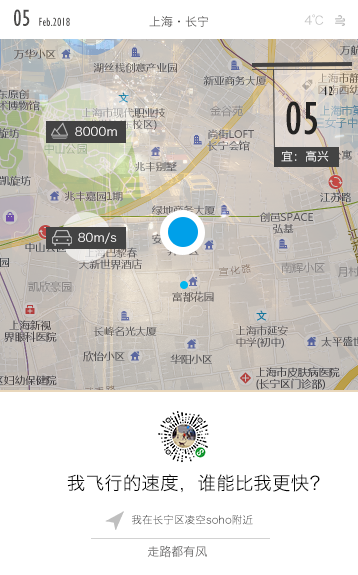
<style>
.page{position:relative;width:358px;height:575px;background:#ffffff}
.page>*{position:absolute;margin:0}
.t1{font:12px "GillSansMT-Condensed";color:#4d4c4b}
.t2{font:24px "GillSansMT-Condensed";color:#4d4c4b}
.t3{font:12px "HiraginoSansGB-W3";color:#4d4c4b}
.t4{font:12px "HiraginoSansGB-W3";color:#c3c3c3}
.t5{font:13.3px "GillSansMT-Condensed";color:#242423}
.t6{font:48px "GillSansMT-Condensed";color:#242423}
.t7{font:12px "HiraginoSansGB-W3";color:#fdfbfb}
.t8{font:12px "HiraginoSansGB-W3";color:#fefefe}
.t9{font:18.7px "HiraginoSansGB-W3";color:#040404}
.t10{font:10.7px "HiraginoSansGB-W3";color:#484848}
.t11{font:12px "HiraginoSansGB-W3";color:#5c5b5b}
</style>
<div class="page">
<p class="t1" style="left:14px;top:9px;width:56px;height:17px"><span class="t2">05 </span>Feb.2018</p>
<p class="t3" style="left:149px;top:16px;width:59px;height:11px">上海·长宁</p>
<p class="t4" style="left:304px;top:14px;width:20px;height:11px">4℃</p>
<p class="t5" style="left:325px;top:86px;width:8px;height:10px">12</p>
<p class="t6" style="left:286px;top:101px;width:31px;height:34px">05</p>
<p class="t7" style="left:75px;top:126px;width:42px;height:10px">8000m</p>
<p class="t8" style="left:281px;top:150px;width:48px;height:12px">宜：高兴</p>
<p class="t7" style="left:78px;top:232px;width:39px;height:12px">80m/s</p>
<p class="t9" style="left:67px;top:474px;width:253px;height:19px">我飞行的速度，谁能比我更快？</p>
<p class="t10" style="left:132px;top:514px;width:121px;height:11px">我在长宁区凌空soho附近</p>
<p class="t11" style="left:147px;top:545px;width:60px;height:13px">走路都有风</p>
</div>
